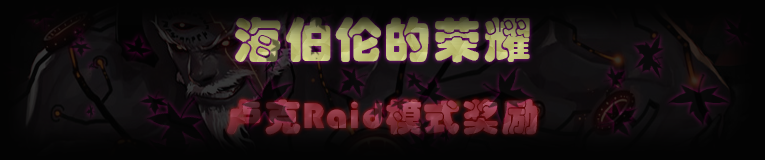
<style>
.page{position:relative;width:765px;height:160px}
.page>*{position:absolute;margin:0}
.t1{font:48px "STHupo";letter-spacing:0.04em}
.t2{font:37.2px "STHupo";letter-spacing:0.04em}
</style>
<div class="page">
<p class="t1" style="left:235px;top:16px;width:295px;height:47px">海伯伦的荣耀</p>
<p class="t2" style="left:227px;top:99px;width:311px;height:36px">卢克Raid模式奖励</p>
</div>
